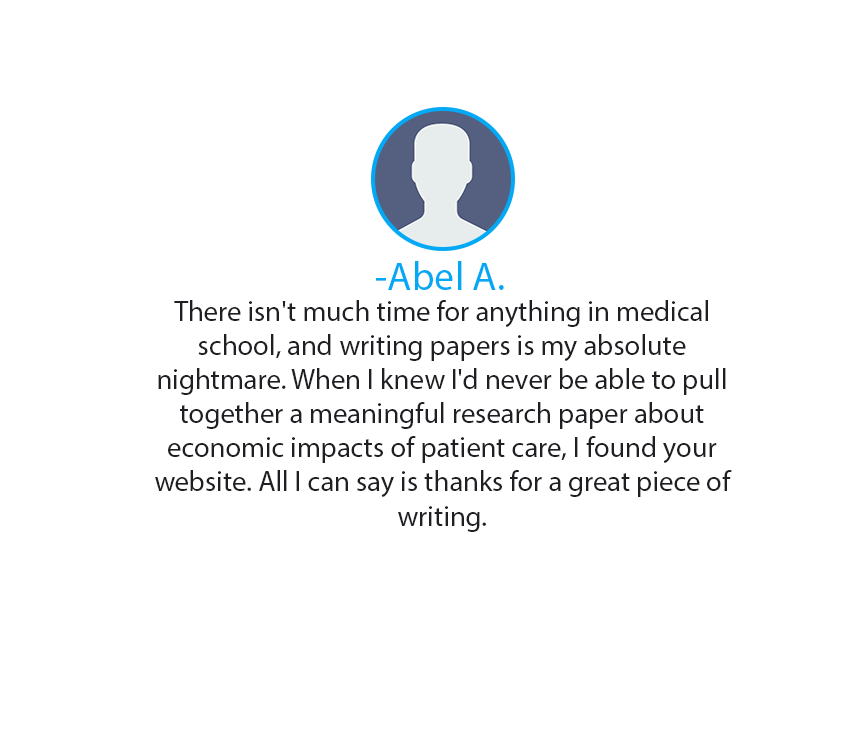
<style>
.page{position:relative;width:862px;height:756px;background:#ffffff}
.page>*{position:absolute;margin:0}
.t1{font:40px "MyriadPro-Regular";color:#03a9f4}
.t2{font:28.5px "MyriadPro-Regular";color:#1e1f23}
</style>
<div class="page">
<p class="t1" style="left:376px;top:261px;width:128px;height:29px">-Abel A.</p>
<p class="t2" style="left:155px;top:300px;width:577px;height:232px;text-align:center">There isn't much time for anything in medical school, and writing papers is my absolute nightmare. When I knew I'd never be able to pull together a meaningful research paper about economic impacts of patient care, I found your website. All I can say is thanks for a great piece of writing.</p>
</div>
